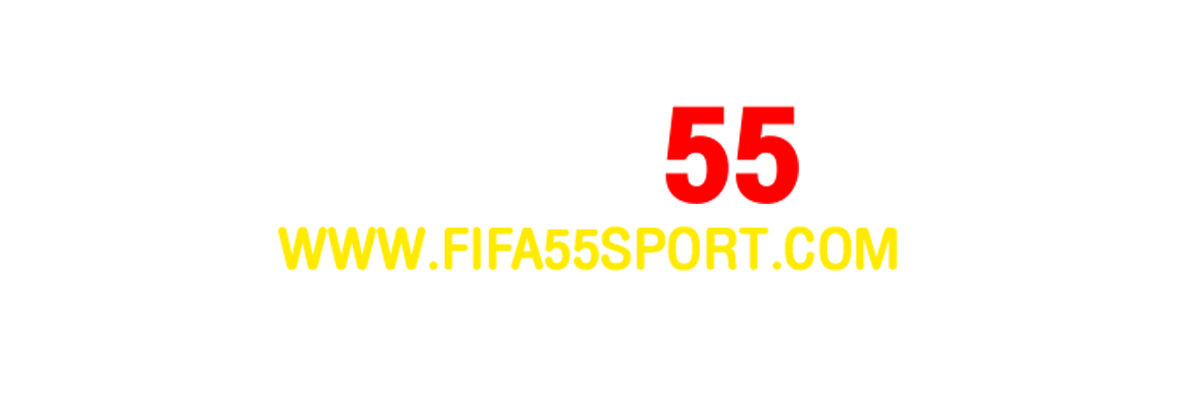
<style>
.page{position:relative;width:1200px;height:400px;background:#ffffff}
.page>*{position:absolute;margin:0}
.t1{font:195.7px "DBHelvethaicaX-BlkCond";color:#ffffff}
.t2{font:195.7px "DBHelvethaicaX-BlkCond";color:#ff0000}
.t3{font:81.9px "DBHelvethaicaMonX-BdCond";color:#ffea00}
</style>
<div class="page">
<p class="t1" style="left:424px;top:102px;width:375px;height:102px">FIFA<span class="t2">55</span></p>
<p class="t3" style="left:278px;top:226px;width:619px;height:45px">WWW.FIFA55SPORT.COM</p>
</div>
